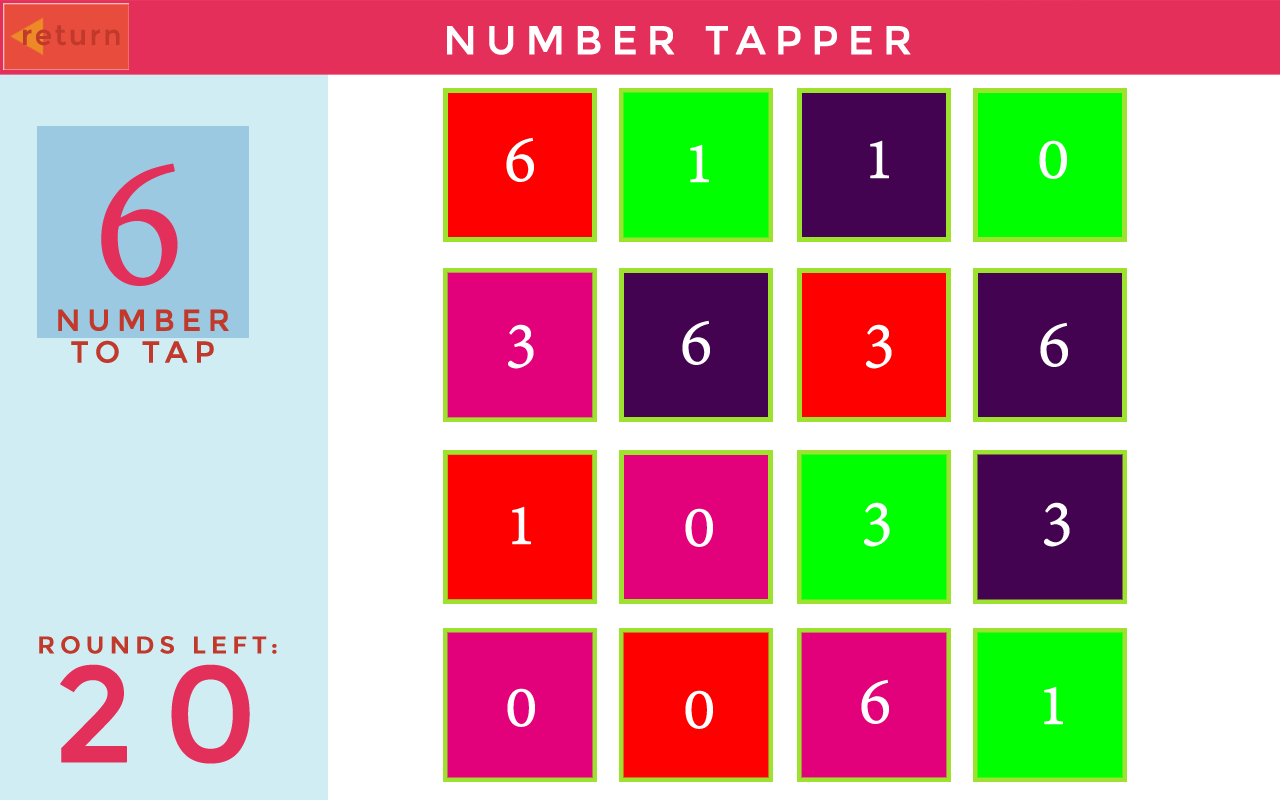
<style>
.page{position:relative;width:1280px;height:800px;background:#ffffff}
.page>*{position:absolute;margin:0}
.t1{font:40px "Montserrat-Regular";letter-spacing:0.2em;color:#ffffff;text-transform:uppercase;font-weight:bold}
.t2{font:72px "AdobeDevanagari-Regular";letter-spacing:0.2em;color:#ffffff;text-transform:uppercase;font-weight:bold}
.t3{font:200px "AdobeDevanagari-Regular";letter-spacing:0.2em;color:#e3305a;text-transform:uppercase;font-weight:bold}
.t4{font:30px/31.9px "Montserrat-Regular";letter-spacing:0.2em;color:#c1392b;text-transform:uppercase;font-weight:bold}
.t5{font:24px "Montserrat-Regular";letter-spacing:0.2em;color:#c1392b;text-transform:uppercase;font-weight:bold}
.t6{font:135px "Montserrat-Regular";letter-spacing:0.2em;color:#e3305a;text-transform:uppercase;font-weight:bold}
</style>
<div class="page">
<p class="t1" style="left:447px;top:26px;width:464px;height:29px">Number Tapper</p>
<p class="t2" style="left:506px;top:137px;width:28px;height:45px">6</p>
<p class="t2" style="left:690px;top:144px;width:19px;height:39px">1</p>
<p class="t2" style="left:870px;top:140px;width:19px;height:39px">1</p>
<p class="t2" style="left:1039px;top:140px;width:28px;height:39px">0</p>
<p class="t3" style="left:101px;top:163px;width:77px;height:123px">6</p>
<p class="t4" style="left:58px;top:309px;width:171px;height:54px;text-align:center">Number <br>to tap</p>
<p class="t2" style="left:508px;top:324px;width:26px;height:45px">3</p>
<p class="t2" style="left:682px;top:320px;width:28px;height:45px">6</p>
<p class="t2" style="left:866px;top:324px;width:26px;height:45px">3</p>
<p class="t2" style="left:1040px;top:322px;width:28px;height:45px">6</p>
<p class="t2" style="left:512px;top:506px;width:19px;height:39px">1</p>
<p class="t2" style="left:685px;top:508px;width:28px;height:39px">0</p>
<p class="t2" style="left:864px;top:502px;width:26px;height:45px">3</p>
<p class="t2" style="left:1044px;top:502px;width:26px;height:45px">3</p>
<p class="t5" style="left:39px;top:636px;width:238px;height:18px">Rounds left:</p>
<p class="t6" style="left:60px;top:664px;width:190px;height:100px">20</p>
<p class="t2" style="left:507px;top:688px;width:28px;height:39px">0</p>
<p class="t2" style="left:861px;top:679px;width:28px;height:45px">6</p>
<p class="t2" style="left:1044px;top:686px;width:19px;height:39px">1</p>
<p class="t2" style="left:685px;top:690px;width:28px;height:39px">0</p>
</div>
